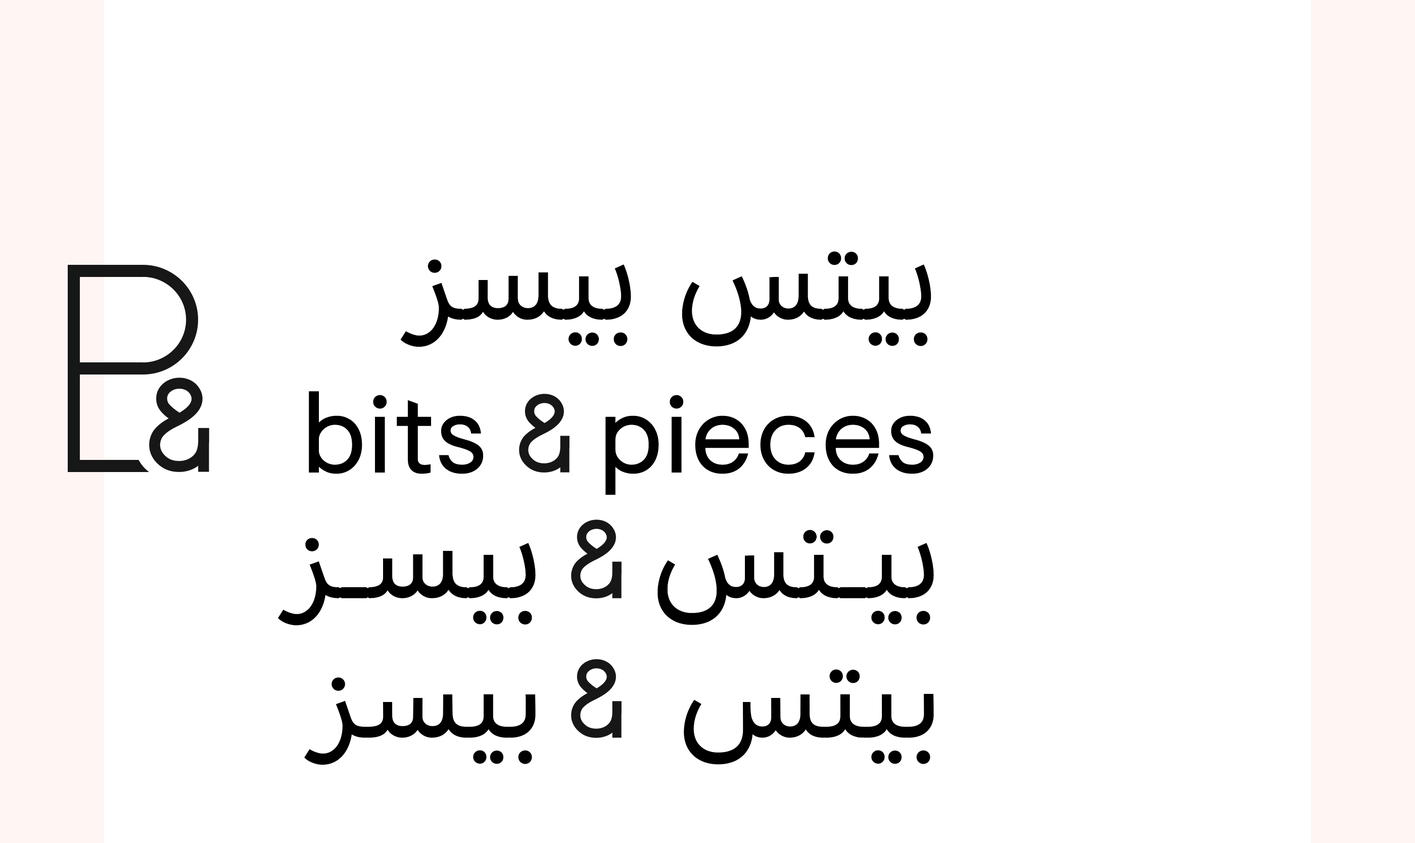
<style>
.page{position:relative;width:1415px;height:843px;background:#ffffff}
.page>*{position:absolute;margin:0}
.t1{font:131.4px "ApercuArabicPro-Regular";letter-spacing:0.025em;color:#000000}
.t2{font:111.2px "Visuelt-Regular";letter-spacing:0.025em;color:#000000}
</style>
<div class="page">
<p class="t1" style="left:400px;top:251px;width:531px;height:96px">ﺰﺴﻴﺑ ﺲﺘﻴﺑ</p>
<p class="t2" style="left:309px;top:391px;width:624px;height:104px">bits &amp;pieces</p>
<p class="t1" style="left:657px;top:530px;width:277px;height:95px">ﺲﺘـﻴﺑ</p>
<p class="t1" style="left:278px;top:538px;width:258px;height:88px">ﺰـﺴﻴﺑ</p>
</div>
